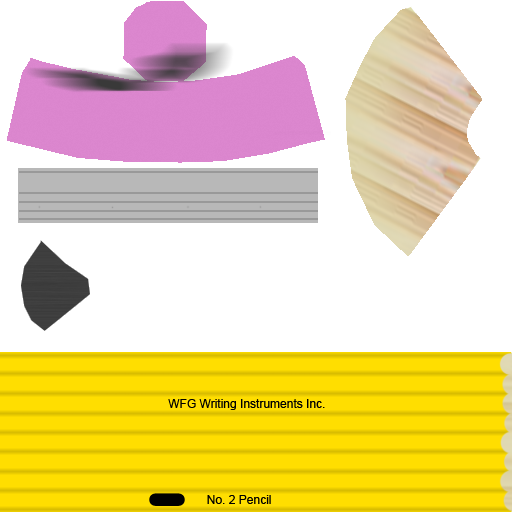
<style>
.page{position:relative;width:512px;height:512px;background:#ffffff}
.page>*{position:absolute;margin:0}
.t1{font:12px "ArialMT";color:#000000}
</style>
<div class="page">
<p class="t1" style="left:168px;top:399px;width:157px;height:11px">WFG Writing Instruments Inc.</p>
<p class="t1" style="left:207px;top:495px;width:64px;height:9px">No. 2 Pencil</p>
</div>
